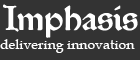
<style>
.page{position:relative;width:140px;height:60px;background:#333333}
.page>*{position:absolute;margin:0}
.t1{font:34.6px "P22MorrisTroy";color:#ffffff}
.t2{font:14px "BookAntiqua";color:#fefefe}
</style>
<div class="page">
<p class="t1" style="left:3px;top:4px;width:135px;height:34px">Imphasis</p>
<p class="t2" style="left:0px;top:39px;width:135px;height:14px">delivering innovation</p>
</div>
